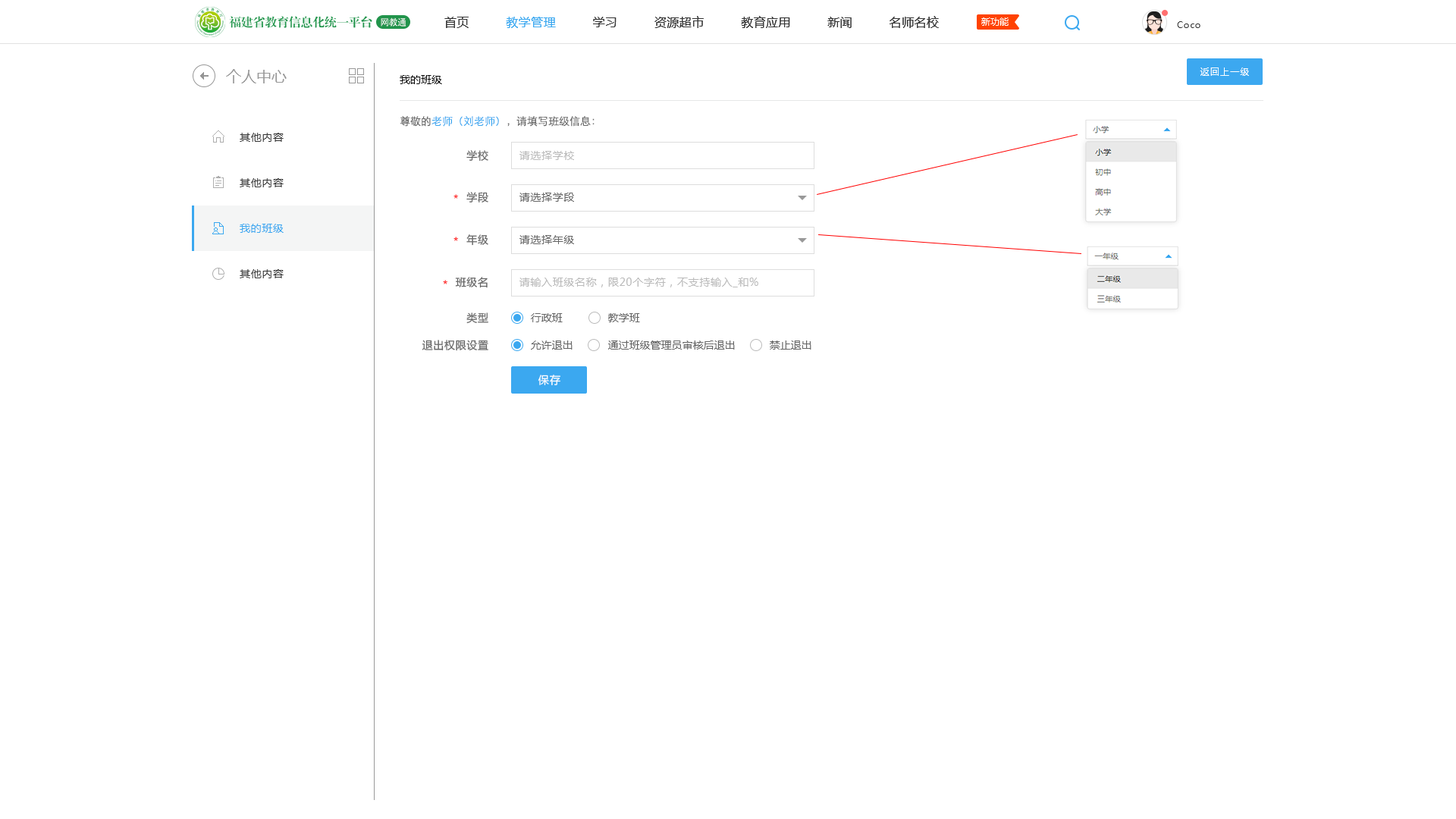
<style>
.page{position:relative;width:1456px;height:819px;background:#ffffff}
.page>*{position:absolute;margin:0}
.t1{font:9.1px "AdobeHeitiStd-Regular";letter-spacing:-0.05em;color:#ffffff}
.t2{font:12.1px "MicrosoftYaHei";letter-spacing:0.025em;color:#333333}
.t3{font:12.1px "MicrosoftYaHei";letter-spacing:0.025em;color:#3ba8f0}
.t4{font:9.1px "MicrosoftYaHei";color:#ffffff}
.t5{font:9.1px "MicrosoftYaHei";letter-spacing:0.05em;color:#333333}
.t6{font:15.2px "MicrosoftYaHei";color:#999999}
.t7{font:10.6px "MicrosoftYaHei";color:#000000}
.t8{font:9.1px "MicrosoftYaHei";letter-spacing:0.1em;color:#ffffff}
.t9{font:10.6px "STXihei";color:#666666}
.t10{font:10.6px "STXihei";color:#3ba8f0}
.t11{font:10.6px/45.5px "MicrosoftYaHei";letter-spacing:0.05em;color:#333333}
.t12{font:10.6px/45.5px "MicrosoftYaHei";letter-spacing:0.05em;color:#3ba8f0}
.t13{font:10.6px "MicrosoftYaHei";letter-spacing:0.05em;color:#666666}
.t14{font:10.6px "MicrosoftYaHei";letter-spacing:0.05em;color:#bbbbbb}
.t15{font:10.6px "MicrosoftYaHei";letter-spacing:0.05em}
.t16{font:10.6px "MicrosoftYaHei";color:#666666}
.t17{font:10.6px "MicrosoftYaHei";letter-spacing:0.1em;color:#ffffff}
</style>
<div class="page">
<p class="t1" style="left:381px;top:17px;width:25px;height:10px">网教通</p>
<p class="t2" style="left:444px;top:16px;width:495px;height:12px">首页         <span class="t3">教学管理</span>         学习         资源超市         教育应用         新闻         名师名校</p>
<p class="t4" style="left:981px;top:17px;width:28px;height:9px">新功能</p>
<p class="t5" style="left:1177px;top:21px;width:23px;height:7px">Coco</p>
<p class="t6" style="left:226px;top:69px;width:61px;height:14px">个人中心</p>
<p class="t7" style="left:400px;top:75px;width:42px;height:9px">我的班级</p>
<p class="t8" style="left:1200px;top:67px;width:49px;height:9px">返回上一级</p>
<p class="t9" style="left:400px;top:116px;width:195px;height:11px">尊敬的<span class="t10">老师（刘老师）</span>，请填写班级信息：</p>
<p class="t11" style="left:240px;top:133px;width:44px;height:145px">其他内容<br>其他内容<br><span class="t12">我的班级<br></span>其他内容</p>
<p class="t13" style="left:466px;top:150px;width:22px;height:12px">学校</p>
<p class="t14" style="left:519px;top:151px;width:55px;height:9px">请选择学校</p>
<p class="t15" style="left:453px;top:194px;width:5px;height:5px">*</p>
<p class="t13" style="left:466px;top:192px;width:22px;height:10px">学段</p>
<p class="t13" style="left:519px;top:193px;width:55px;height:9px">请选择学段</p>
<p class="t15" style="left:453px;top:237px;width:5px;height:4px">*</p>
<p class="t13" style="left:466px;top:234px;width:22px;height:12px">年级</p>
<p class="t13" style="left:519px;top:235px;width:55px;height:9px">请选择年级</p>
<p class="t15" style="left:443px;top:280px;width:4px;height:4px">*</p>
<p class="t13" style="left:455px;top:277px;width:33px;height:11px">班级名</p>
<p class="t14" style="left:519px;top:278px;width:239px;height:9px">请输入班级名称，限20个字符，不支持输入_和%</p>
<p class="t13" style="left:466px;top:312px;width:22px;height:12px">类型</p>
<p class="t16" style="left:531px;top:313px;width:32px;height:9px">行政班</p>
<p class="t16" style="left:608px;top:313px;width:32px;height:9px">教学班</p>
<p class="t13" style="left:422px;top:340px;width:66px;height:11px">退出权限设置</p>
<p class="t16" style="left:531px;top:340px;width:42px;height:10px">允许退出</p>
<p class="t16" style="left:608px;top:340px;width:127px;height:10px">通过班级管理员审核后退出</p>
<p class="t16" style="left:770px;top:340px;width:41px;height:10px">禁止退出</p>
<p class="t17" style="left:538px;top:375px;width:22px;height:10px">保存</p>
</div>
